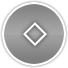
<style>
.page{position:relative;width:68px;height:68px;background:#ffffff}
.page>*{position:absolute;margin:0}
.t1{font:30px "NanumSquareR";color:#ffffff}
</style>
<div class="page">
<p class="t1" style="left:23px;top:22px;width:24px;height:24px">◇</p>
</div>
